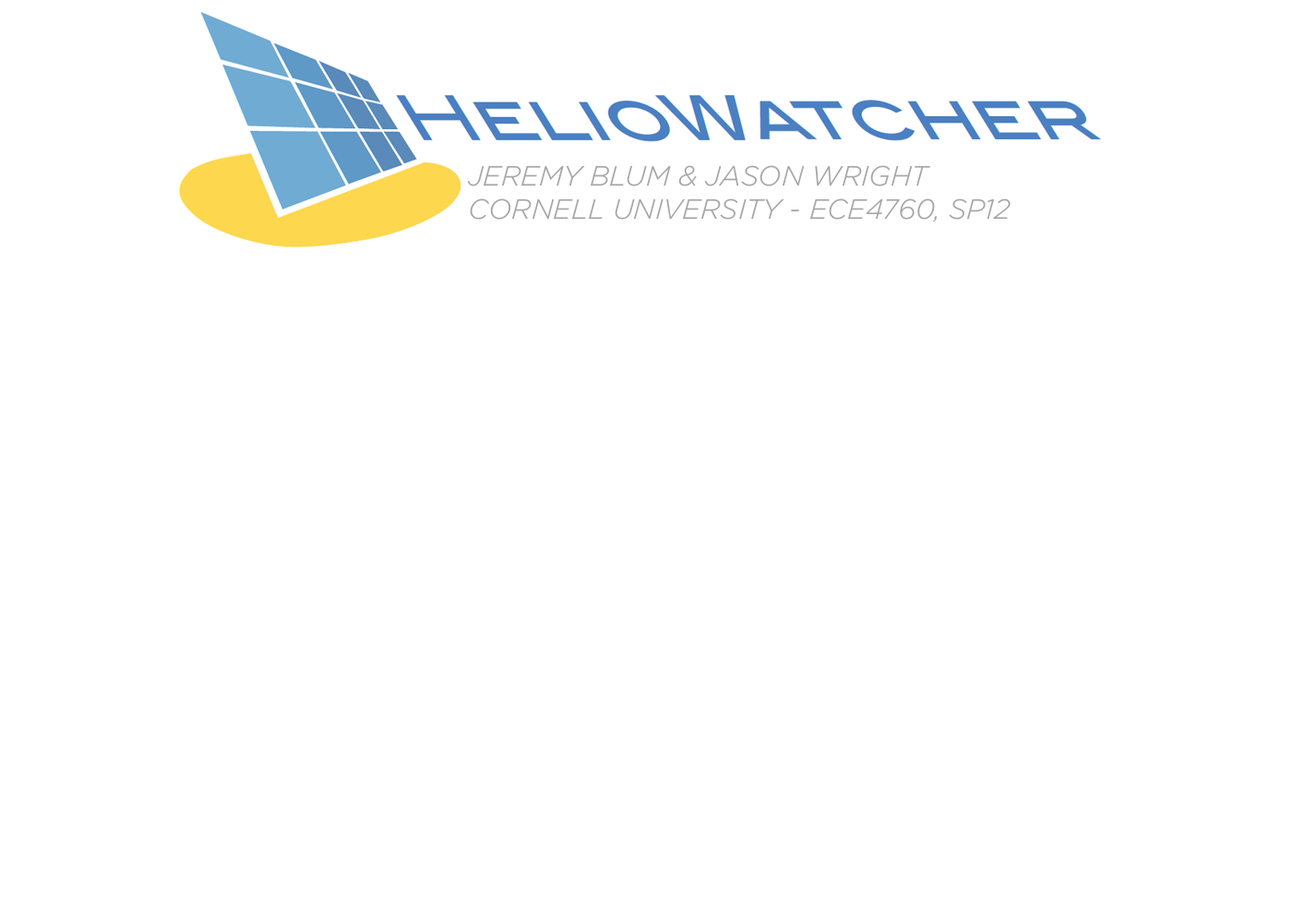
<style>
.page{position:relative;width:1292px;height:923px;background:#ffffff}
.page>*{position:absolute;margin:0}
.t1{font:27.7px "Gotham-LightItalic";color:#a6a6a6;text-transform:uppercase}
</style>
<div class="page">
<p class="t1" style="left:467px;top:165px;width:544px;height:57px">Jeremy Blum &amp; Jason Wright<br>Cornell University - ECE4760, Sp12</p>
</div>
